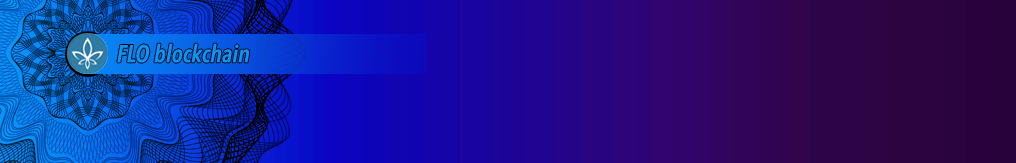
<style>
.page{position:relative;width:1016px;height:163px}
.page>*{position:absolute;margin:0}
.t1{font:24px "AvenirNextCondensed-DemiBoldItalic";color:#0895f7}
</style>
<div class="page">
<p class="t1" style="left:117px;top:43px;width:132px;height:20px">FLO blockchain</p>
</div>
